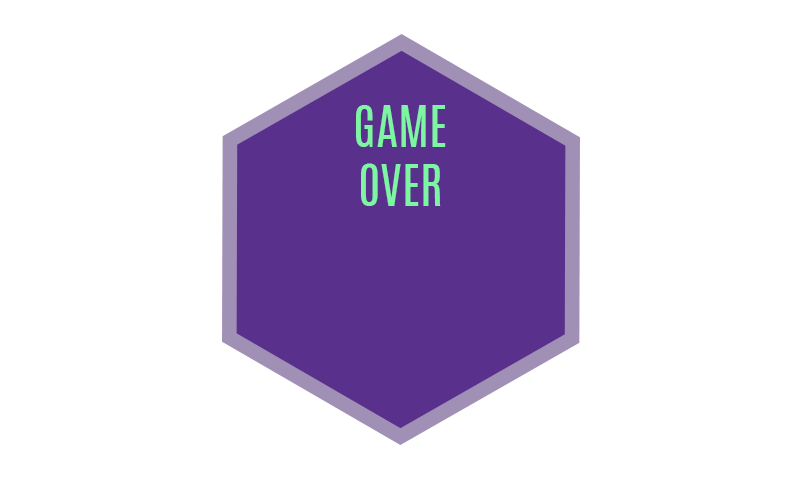
<style>
.page{position:relative;width:800px;height:480px;background:#ffffff}
.page>*{position:absolute;margin:0}
.t1{font:48.6px "Antonio-Regular";color:#7ef5a2}
</style>
<div class="page">
<p class="t1" style="left:356px;top:105px;width:90px;height:101px;text-align:center">GAME<br>OVER</p>
</div>
